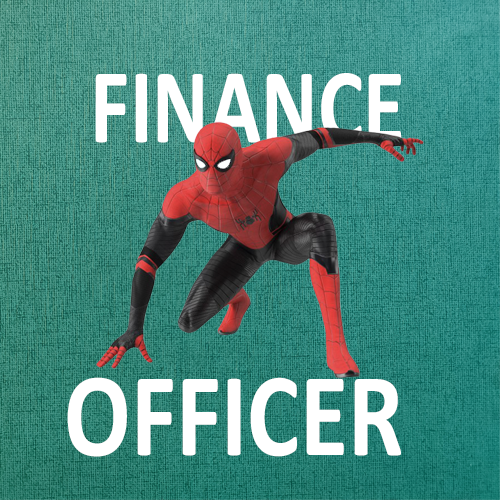
<style>
.page{position:relative;width:500px;height:500px}
.page>*{position:absolute;margin:0}
.t1{font:107.2px "Calibri-Bold";color:#ffffff;text-transform:uppercase;scale:0.8 1}
.t2{font:120.1px "Calibri-Bold";color:#ffffff;text-transform:uppercase;scale:0.82 1}
</style>
<div class="page">
<p class="t1" style="left:95px;top:73px;width:307px;height:71px">FINANCE</p>
<p class="t2" style="left:67px;top:377px;width:334px;height:80px">OFFICER</p>
</div>
